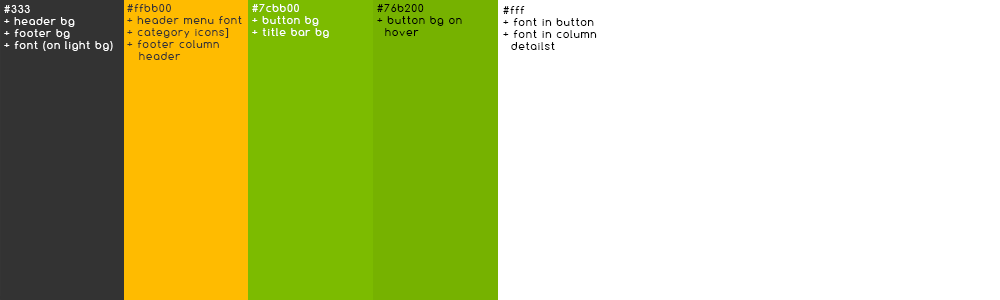
<style>
.page{position:relative;width:1000px;height:300px;background:#ffffff}
.page>*{position:absolute;margin:0}
.t1{font:10px "Comfortaa";letter-spacing:0.11em;color:#ffffff}
.t2{font:10px "Comfortaa";letter-spacing:0.11em;color:#333333}
.t3{font:10px "Comfortaa";letter-spacing:0.11em;color:#000000}
</style>
<div class="page">
<p class="t1" style="left:4px;top:5px;width:109px;height:46px">#333<br>+ header bg<br>+ footer bg<br>+ font (on light bg)</p>
<p class="t2" style="left:127px;top:4px;width:115px;height:56px">#ffbb00<br>+ header menu font<br>+ category icons]<br>+ footer column<br>   header</p>
<p class="t1" style="left:252px;top:4px;width:77px;height:34px">#7cbb00<br>+ button bg<br>+ title bar bg</p>
<p class="t3" style="left:377px;top:4px;width:85px;height:32px">#76b200<br>+ button bg on <br>  hover</p>
<p class="t3" style="left:503px;top:6px;width:94px;height:44px">#fff<br>+ font in button<br>+ font in column<br>  detailst</p>
</div>
